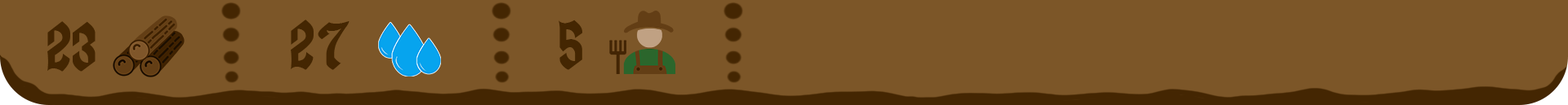
<style>
.page{position:relative;width:1568px;height:105px;background:#7c5628}
.page>*{position:absolute;margin:0}
.t1{font:81.7px "EnchantedLand";color:#442602}
</style>
<div class="page">
<p class="t1" style="left:47px;top:21px;width:49px;height:51px">23</p>
<p class="t1" style="left:291px;top:20px;width:59px;height:50px">27</p>
<p class="t1" style="left:559px;top:20px;width:23px;height:50px">5</p>
</div>
